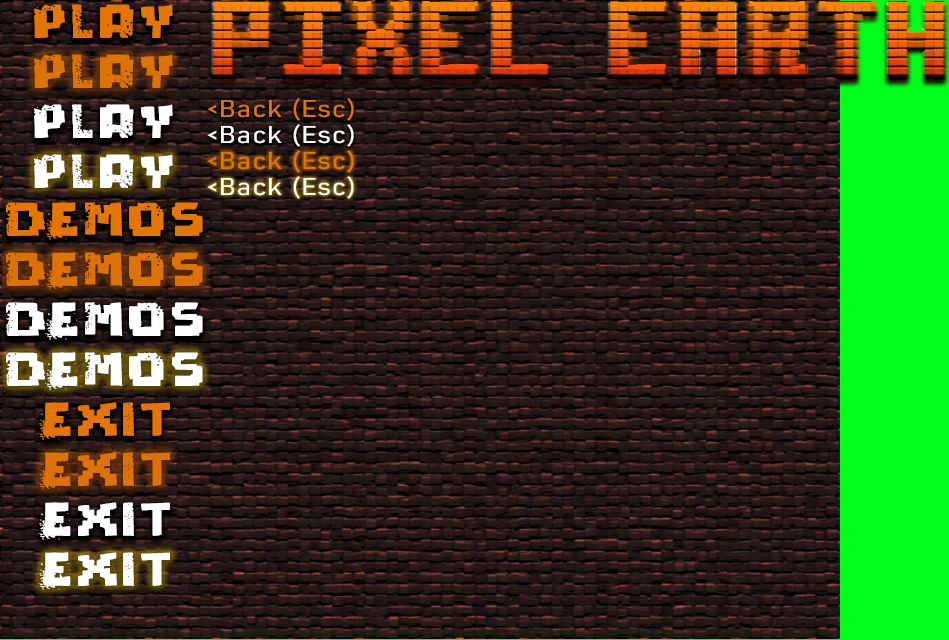
<style>
.page{position:relative;width:949px;height:640px}
.page>*{position:absolute;margin:0}
.t1{font:48px "pixeldead";letter-spacing:0.04em;color:#e47600;scale:1.29 1}
.t2{font:24px "Bahnschrift-SemiLightSemiCondensed";letter-spacing:0.04em;color:#e47600;scale:1.29 1}
.t3{font:48px "pixeldead";letter-spacing:0.04em;color:#ffffff;scale:1.29 1}
.t4{font:24px "Bahnschrift-SemiLightSemiCondensed";letter-spacing:0.04em;color:#ffffff;scale:1.29 1}
</style>
<div class="page">
<p class="t1" style="left:34px;top:4px;width:139px;height:34px">Play</p>
<p class="t1" style="left:34px;top:54px;width:139px;height:34px;opacity:0.95">Play</p>
<p class="t2" style="left:207px;top:98px;width:147px;height:23px">&lt;Back (Esc)</p>
<p class="t3" style="left:34px;top:104px;width:139px;height:34px">Play</p>
<p class="t4" style="left:207px;top:124px;width:147px;height:23px">&lt;Back (Esc)</p>
<p class="t2" style="left:207px;top:150px;width:147px;height:23px">&lt;Back (Esc)</p>
<p class="t3" style="left:34px;top:154px;width:139px;height:34px">Play</p>
<p class="t4" style="left:207px;top:176px;width:147px;height:23px">&lt;Back (Esc)</p>
<p class="t1" style="left:6px;top:202px;width:197px;height:38px">Demos</p>
<p class="t1" style="left:6px;top:252px;width:197px;height:38px;opacity:0.95">Demos</p>
<p class="t3" style="left:6px;top:302px;width:197px;height:38px">Demos</p>
<p class="t3" style="left:6px;top:352px;width:197px;height:38px">Demos</p>
<p class="t1" style="left:38px;top:402px;width:132px;height:38px">Exit</p>
<p class="t1" style="left:38px;top:452px;width:132px;height:38px;opacity:0.95">Exit</p>
<p class="t3" style="left:38px;top:502px;width:132px;height:38px">Exit</p>
<p class="t3" style="left:38px;top:552px;width:132px;height:38px">Exit</p>
</div>
